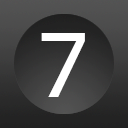
<style>
.page{position:relative;width:128px;height:128px}
.page>*{position:absolute;margin:0}
.t1{font:100px "Consolas";color:#ffffff}
</style>
<div class="page">
<p class="t1" style="left:41px;top:33px;width:44px;height:64px">7</p>
</div>
